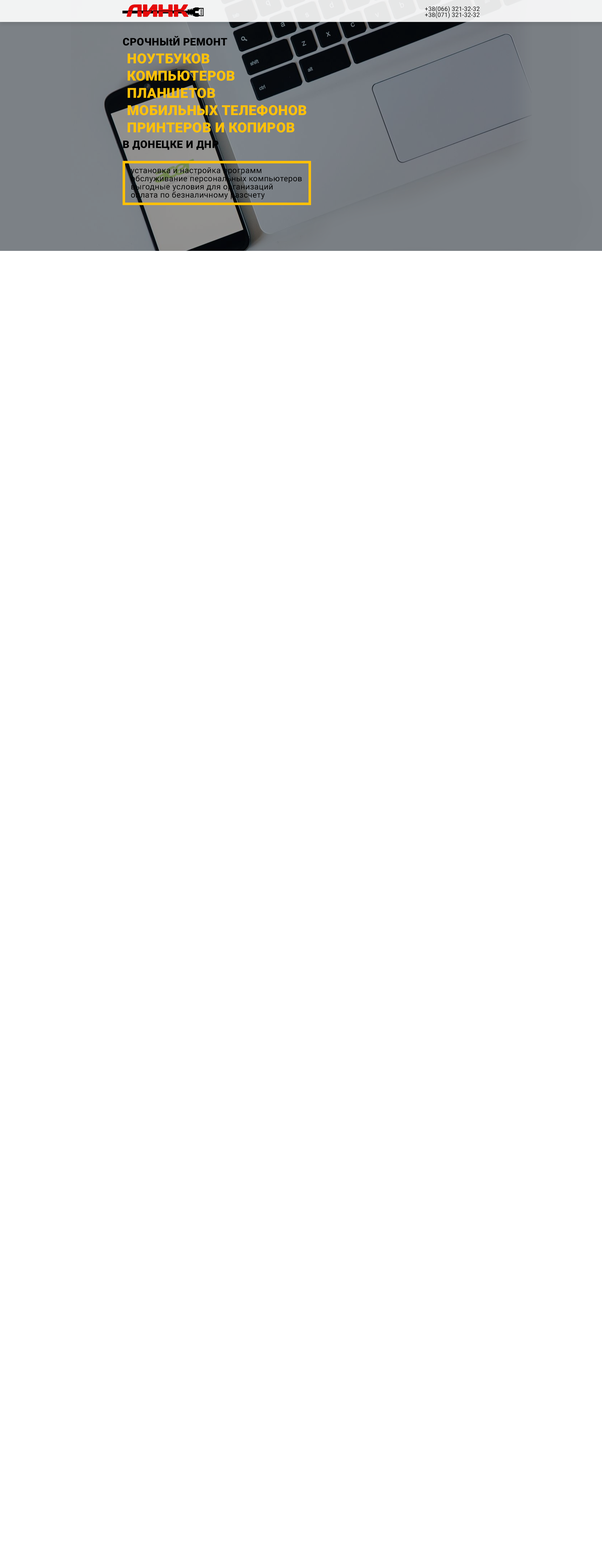
<style>
.page{position:relative;width:602px;height:1568px;background:#ffffff}
.page>*{position:absolute;margin:0}
.t1{font:6px/6px "Roboto-Regular";letter-spacing:0.02em;color:#000000}
.t2{font:10.5px "Roboto-Black";letter-spacing:0.02em;color:#000000}
.t3{font:13.8px/17.3px "Roboto-Black";letter-spacing:0.02em;color:#ffc107;text-transform:uppercase}
.t4{font:8px/8.2px "Roboto-Regular";letter-spacing:0.02em;color:#000000}
</style>
<div class="page">
<p class="t1" style="left:425px;top:6px;width:55px;height:13px;text-align:right">+38(066) 321-32-32<br>+38(071) 321-32-32</p>
<p class="t2" style="left:123px;top:36px;width:104px;height:10px">СРОЧНЫtЙ РЕМОНТ</p>
<p class="t3" style="left:128px;top:53px;width:178px;height:80px">Ноутбуков<br>Компьютеров<br>Планшетов<br>Мобильных телефонов<br>принтеров и копиров</p>
<p class="t2" style="left:123px;top:140px;width:96px;height:10px">В ДОНЕЦКЕ И ДНР</p>
<p class="t4" style="left:131px;top:167px;width:171px;height:32px">установка и настройка программ<br>обслуживание персональных компьютеров<br>выгодные условия для организаций<br>оплата по безналичному разсчету</p>
</div>
